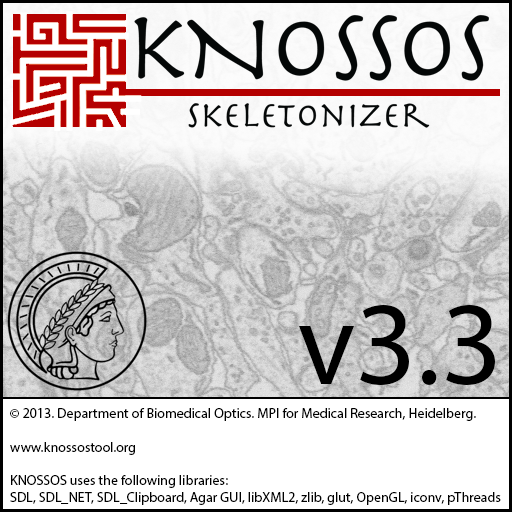
<style>
.page{position:relative;width:512px;height:512px}
.page>*{position:absolute;margin:0}
.t1{font:120px "MyriadPro-Regular";color:#000000}
.t2{font:14px "MyriadPro-Regular";color:#000000}
</style>
<div class="page">
<p class="t1" style="left:299px;top:305px;width:196px;height:80px">v3.3</p>
<p class="t2" style="left:10px;top:408px;width:491px;height:97px">© 2013. Department of Biomedical Optics. MPI for Medical Research, Heidelberg.<br><br>www.knossostool.org<br><br>KNOSSOS uses the following libraries:<br>SDL, SDL_NET, SDL_Clipboard, Agar GUI, libXML2, zlib, glut, OpenGL, iconv, pThreads</p>
</div>
